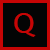
<style>
.page{position:relative;width:50px;height:50px;background:#040404}
.page>*{position:absolute;margin:0}
.t1{font:27.6px "LucidaGrande";color:#c70505}
</style>
<div class="page">
<p class="t1" style="left:14px;top:13px;width:22px;height:24px">Q</p>
</div>
